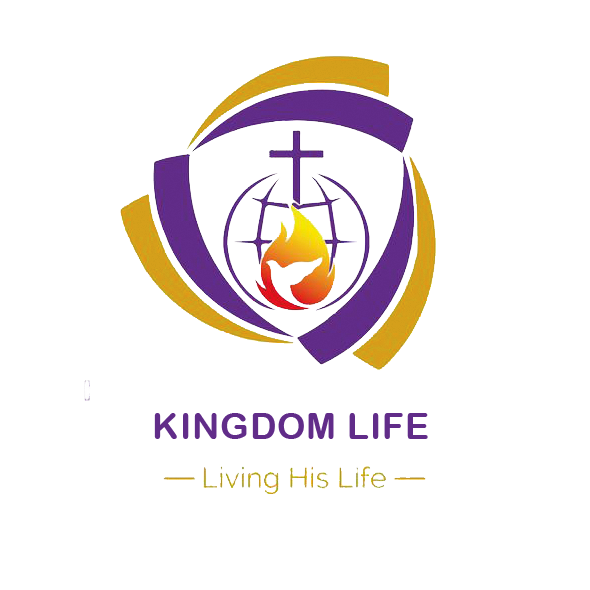
<style>
.page{position:relative;width:590px;height:590px;background:#ffffff}
.page>*{position:absolute;margin:0}
.t1{font:36px "ArialRoundedMTBold";letter-spacing:0.025em;color:#612c8a}
</style>
<div class="page">
<p class="t1" style="left:154px;top:413px;width:274px;height:26px">KINGDOM LIFE</p>
</div>
